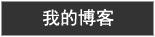
<style>
.page{position:relative;width:155px;height:37px;background:#333333}
.page>*{position:absolute;margin:0}
.t1{font:18px "SimHei";color:#ffffff}
</style>
<div class="page">
<p class="t1" style="left:42px;top:9px;width:72px;height:17px">我的博客</p>
</div>
